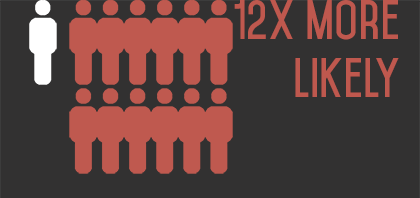
<style>
.page{position:relative;width:420px;height:198px;background:#323131}
.page>*{position:absolute;margin:0}
.t1{font:48px "Mohave-Bold";color:#bf584e}
</style>
<div class="page">
<p class="t1" style="left:234px;top:0px;width:165px;height:97px">12x more<br>likely</p>
</div>
